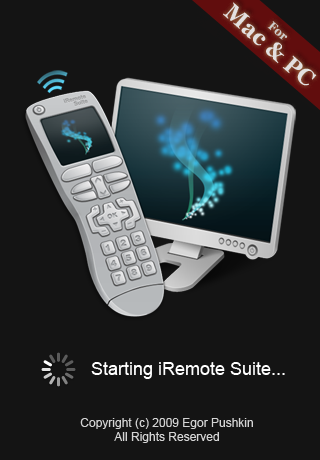
<style>
.page{position:relative;width:320px;height:460px;background:#141414}
.page>*{position:absolute;margin:0}
.t1{font:23px/20px "Georgia-Bold";color:#e3e0e0}
.t2{font:12px/20px "Georgia-Bold";color:#cecece}
.t3{font:18px "ArialMT";color:#ffffff}
.t4{font:12px "ArialMT";color:#d4d4d4}
</style>
<div class="page">
<p class="t1" style="left:223px;top:2px;width:94px;height:84px;text-align:center;rotate:41deg"><span class="t2">For <br></span>Mac &amp; PC</p>
<p class="t3" style="left:91px;top:362px;width:194px;height:17px">Starting iRemote Suite...</p>
<p class="t4" style="left:80px;top:418px;width:173px;height:25px;text-align:center">Copyright (c) 2009 Egor Pushkin<br>All Rights Reserved</p>
</div>
